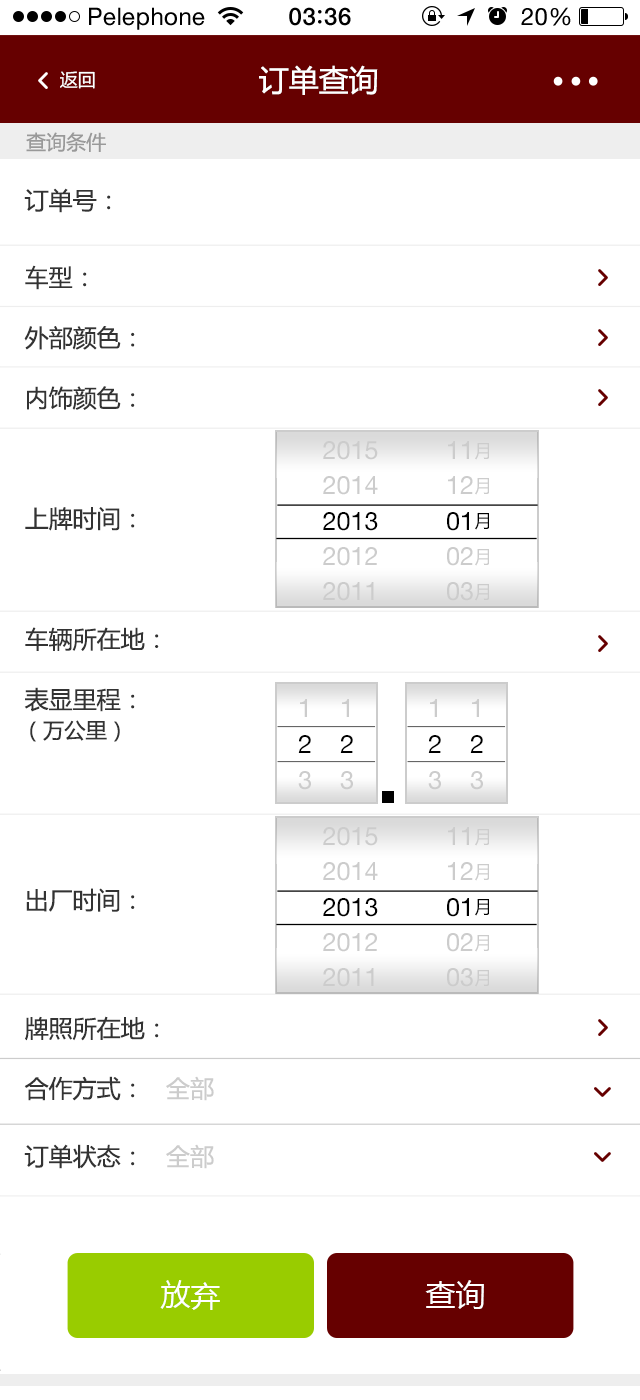
<style>
.page{position:relative;width:640px;height:1400px;background:#ffffff}
.page>*{position:absolute;margin:0}
.t1{font:24px "HelveticaNeue";letter-spacing:0.02em;color:#000000}
.t2{font:24px "HelveticaNeue-Medium";letter-spacing:0.03em;color:#000000}
.t3{font:29.9px "MicrosoftYaHei";color:#ffffff}
.t4{font:18px "MicrosoftYaHei";color:#ffffff}
.t5{font:20px "MicrosoftYaHei";color:#999999}
.t6{font:24px "MicrosoftYaHei";color:#333333}
.t7{font:24px/60.3px "MicrosoftYaHei";color:#333333}
.t8{font:24px/68px "MicrosoftYaHei";color:#333333}
.t9{font:24px/60px "MicrosoftYaHei";color:#333333}
.t10{font:24px/60px "MicrosoftYaHei";color:#cccccc}
.t11{font:25.2px/35.3px "HelveticaNeue";color:#cccccc}
.t12{font:25.2px/35.3px "HelveticaNeue";color:#000000}
.t13{font:17.7px/35.3px "MicrosoftYaHei";color:#cccccc}
.t14{font:17.7px/35.3px "MicrosoftYaHei";color:#000000}
.t15{font:25.4px/35.6px "HelveticaNeue";color:#cccccc}
.t16{font:25.4px/35.6px "HelveticaNeue";color:#000000}
.t17{font:21.3px "MicrosoftYaHei";color:#333333}
.t18{font:30px "MicrosoftYaHei";color:#ffffff}
</style>
<div class="page">
<p class="t1" style="left:89px;top:7px;width:116px;height:23px">Pelephone</p>
<p class="t2" style="left:289px;top:7px;width:62px;height:19px">03 36</p>
<p class="t1" style="left:521px;top:7px;width:50px;height:19px">20%</p>
<p class="t3" style="left:259px;top:65px;width:119px;height:30px">订单查询</p>
<p class="t4" style="left:60px;top:71px;width:35px;height:18px">返回</p>
<p class="t5" style="left:26px;top:132px;width:80px;height:20px">查询条件</p>
<p class="t6" style="left:24px;top:188px;width:87px;height:25px">订单号：</p>
<p class="t7" style="left:24px;top:265px;width:190px;height:904px">车型：<br>外部颜色：<br>内饰颜色：<br><br>上牌时间：<br><br>车辆所在地：<br>表显里程：<br><br><br>出厂时间：<br><br><span class="t8">牌照所在地：<br></span><span class="t9">合作方式：   </span><span class="t10">全部<br></span><span class="t8">订单状态：   </span><span class="t10">全部</span></p>
<p class="t11" style="left:323px;top:441px;width:55px;height:160px">2015<br>2014<br><span class="t12">2013<br></span>2012<br>2011</p>
<p class="t11" style="left:447px;top:441px;width:42px;height:160px">11<span class="t13">月<br></span>12<span class="t13">月<br></span><span class="t12">01</span><span class="t14">月<br></span>02<span class="t13">月<br></span>03<span class="t13">月</span></p>
<p class="t15" style="left:298px;top:699px;width:13px;height:91px">1<br><span class="t16">2<br></span>3</p>
<p class="t15" style="left:340px;top:699px;width:13px;height:91px">1<br><span class="t16">2<br></span>3</p>
<p class="t15" style="left:428px;top:699px;width:13px;height:91px">1<br><span class="t16">2<br></span>3</p>
<p class="t15" style="left:470px;top:699px;width:13px;height:91px">1<br><span class="t16">2<br></span>3</p>
<p class="t17" style="left:30px;top:720px;width:90px;height:22px">（万公里）</p>
<p class="t11" style="left:323px;top:827px;width:55px;height:160px">2015<br>2014<br><span class="t12">2013<br></span>2012<br>2011</p>
<p class="t11" style="left:447px;top:827px;width:42px;height:160px">11<span class="t13">月<br></span>12<span class="t13">月<br></span><span class="t12">01</span><span class="t14">月<br></span>02<span class="t13">月<br></span>03<span class="t13">月</span></p>
<p class="t18" style="left:160px;top:1280px;width:60px;height:30px">放弃</p>
<p class="t18" style="left:425px;top:1280px;width:59px;height:29px">查询</p>
</div>
